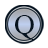
<style>
.page{position:relative;width:48px;height:48px;background:#ffffff}
.page>*{position:absolute;margin:0}
.t1{font:29px "MongolianBaiti";color:#061320}
</style>
<div class="page">
<p class="t1" style="left:15px;top:15px;width:19px;height:25px">Q</p>
</div>
